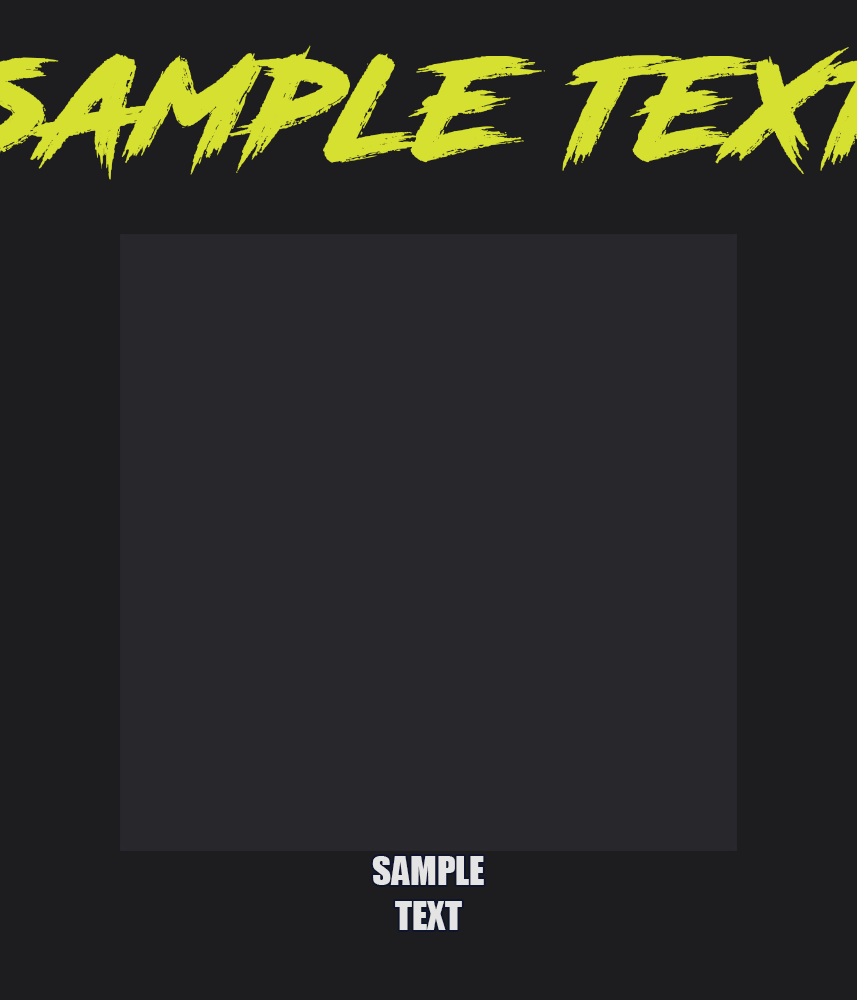
<style>
.page{position:relative;width:857px;height:1000px;background:#1d1d20}
.page>*{position:absolute;margin:0}
.t1{font:37px "Impact";color:#e4e4e4}
</style>
<div class="page">
<p class="t1" style="left:372px;top:856px;width:112px;height:74px;text-align:center">SAMPLE<br>TEXT</p>
</div>
